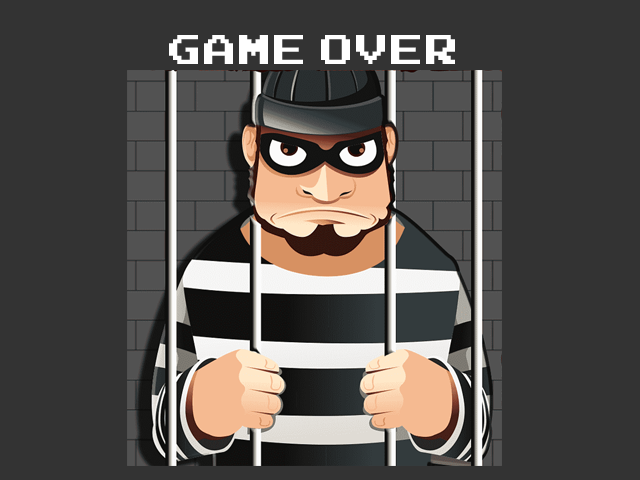
<style>
.page{position:relative;width:640px;height:480px;background:#333333}
.page>*{position:absolute;margin:0}
.t1{font:66px "Arcadepix-Plus";color:#ffffff}
</style>
<div class="page">
<p class="t1" style="left:169px;top:35px;width:286px;height:29px">GAME OVER</p>
</div>
